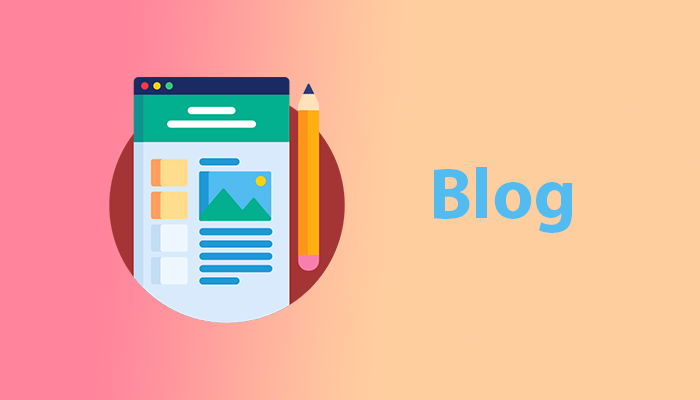
<style>
.page{position:relative;width:700px;height:400px;background:#ffce9f}
.page>*{position:absolute;margin:0}
.t1{font:72px "MyriadPro-Bold";color:#52bbef}
</style>
<div class="page">
<p class="t1" style="left:434px;top:167px;width:139px;height:66px">Blog</p>
</div>
